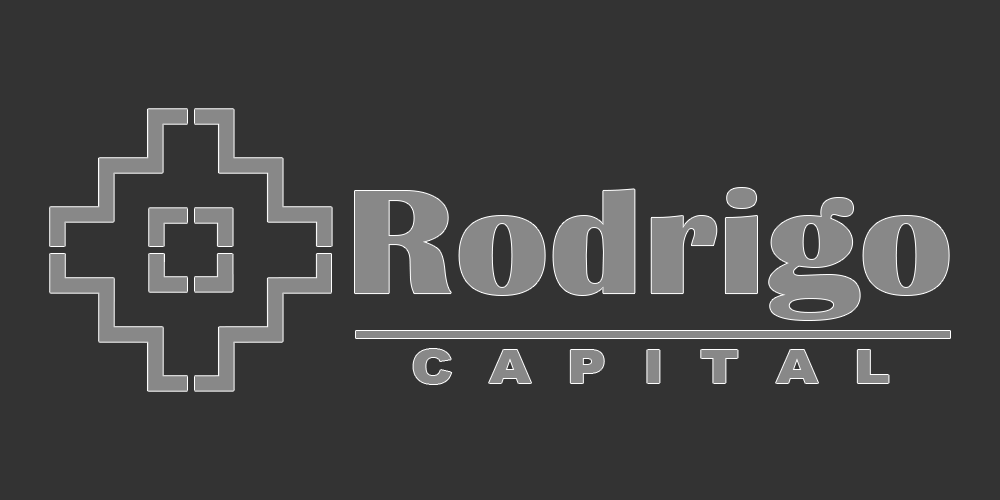
<style>
.page{position:relative;width:1000px;height:500px;background:#333333}
.page>*{position:absolute;margin:0}
.t1{font:152.8px "BritannicBold";color:#888888;scale:1.14 1}
.t2{font:45.5px "Arial-Black";color:#888888;scale:1.19 1}
</style>
<div class="page">
<p class="t1" style="left:355px;top:188px;width:594px;height:132px">Rodrigo</p>
<p class="t2" style="left:413px;top:349px;width:476px;height:35px">C  A  P  I  T  A  L</p>
</div>
